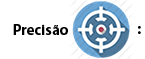
<style>
.page{position:relative;width:145px;height:59px;background:#ffffff}
.page>*{position:absolute;margin:0}
.t1{font:15px "MyriadPro-Bold";color:#000000}
.t2{font:25.3px "DilleniaUPCBold";color:#000000}
.t3{font:15.2px "MyriadPro-Bold";color:#000000}
</style>
<div class="page">
<p class="t1" style="left:13px;top:24px;width:55px;height:11px"><span class="t2"><br></span>Precisão</p>
<p class="t3" style="left:138px;top:26px;width:3px;height:8px">:</p>
</div>
